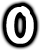
<style>
.page{position:relative;width:40px;height:50px;background:#ffffff}
.page>*{position:absolute;margin:0}
.t1{font:43px "DFKanTeiRyu-XB-WINP-RKSJ-H";color:#ffffff;font-weight:bold}
</style>
<div class="page">
<p class="t1" style="left:6px;top:6px;width:28px;height:38px">0</p>
</div>
